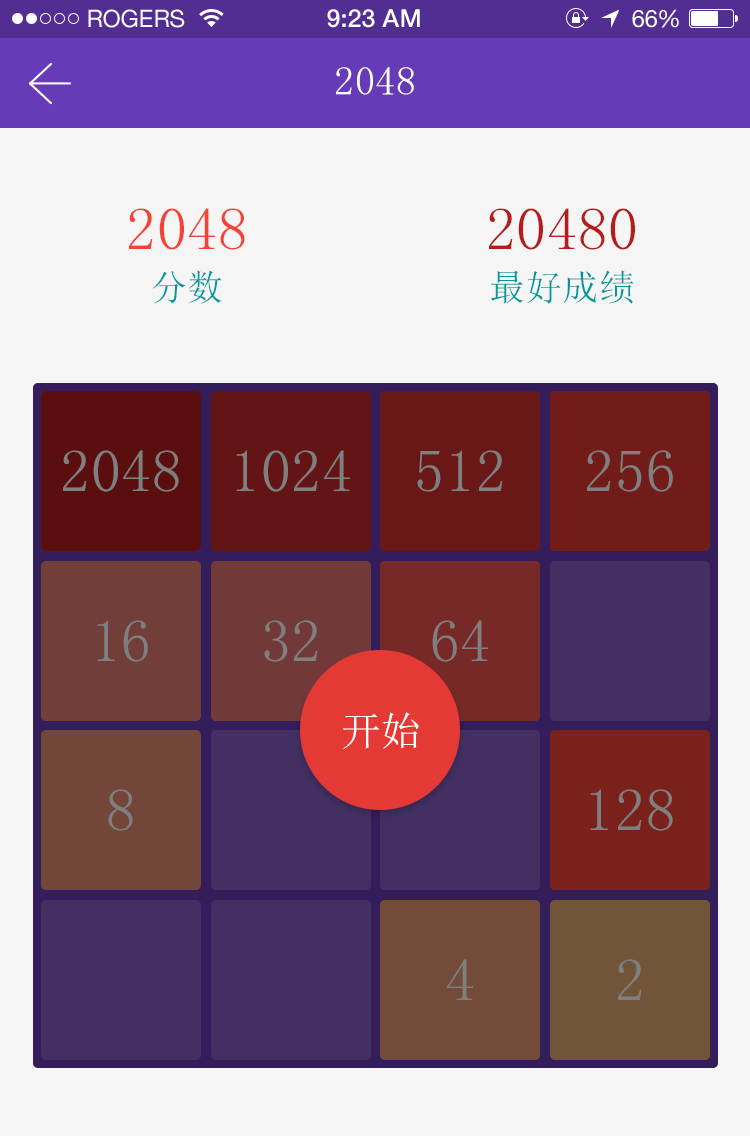
<style>
.page{position:relative;width:750px;height:1136px;background:#f5f5f5}
.page>*{position:absolute;margin:0}
.t1{font:24px "HelveticaNeue";color:#ffffff}
.t2{font:25px "HelveticaNeue-Medium";color:#ffffff}
.t3{font:24px "HelveticaNeue";letter-spacing:-0.02em;color:#ffffff}
.t4{font:40px "SimSun";letter-spacing:0.01em;color:#ffffff}
.t5{font:60px/50px "SimSun";letter-spacing:0.01em;color:#f44336}
.t6{font:36px/50px "SimSun";letter-spacing:0.01em;color:#009999}
.t7{font:60px/50px "SimSun";letter-spacing:0.01em;color:#b71c1c}
.t8{font:60px "SimSun";letter-spacing:0.01em;color:#7f7f7f}
</style>
<div class="page">
<p class="t1" style="left:88px;top:9px;width:97px;height:19px">ROGERS</p>
<p class="t2" style="left:327px;top:9px;width:93px;height:19px">9:23 AM</p>
<p class="t1" style="left:632px;top:9px;width:47px;height:19px">6<span class="t3">6</span>%</p>
<p class="t4" style="left:336px;top:67px;width:78px;height:28px">2048</p>
<p class="t5" style="left:129px;top:208px;width:116px;height:96px;text-align:center">2048<br><span class="t6">分数</span></p>
<p class="t7" style="left:489px;top:208px;width:146px;height:96px;text-align:center">20480<br><span class="t6">最好成绩</span></p>
<p class="t8" style="left:63px;top:450px;width:116px;height:42px">2048</p>
<p class="t8" style="left:236px;top:450px;width:114px;height:42px">1024</p>
<p class="t8" style="left:417px;top:450px;width:86px;height:42px">512</p>
<p class="t8" style="left:587px;top:450px;width:86px;height:42px">256</p>
<p class="t8" style="left:97px;top:620px;width:51px;height:42px">16</p>
<p class="t8" style="left:264px;top:620px;width:54px;height:42px">32</p>
<p class="t8" style="left:432px;top:620px;width:56px;height:42px">64</p>
<p class="t4" style="left:342px;top:712px;width:77px;height:37px">开始</p>
<p class="t8" style="left:108px;top:789px;width:25px;height:42px">8</p>
<p class="t8" style="left:590px;top:789px;width:83px;height:42px">128</p>
<p class="t8" style="left:447px;top:959px;width:26px;height:41px">4</p>
<p class="t8" style="left:618px;top:959px;width:24px;height:41px">2</p>
</div>
